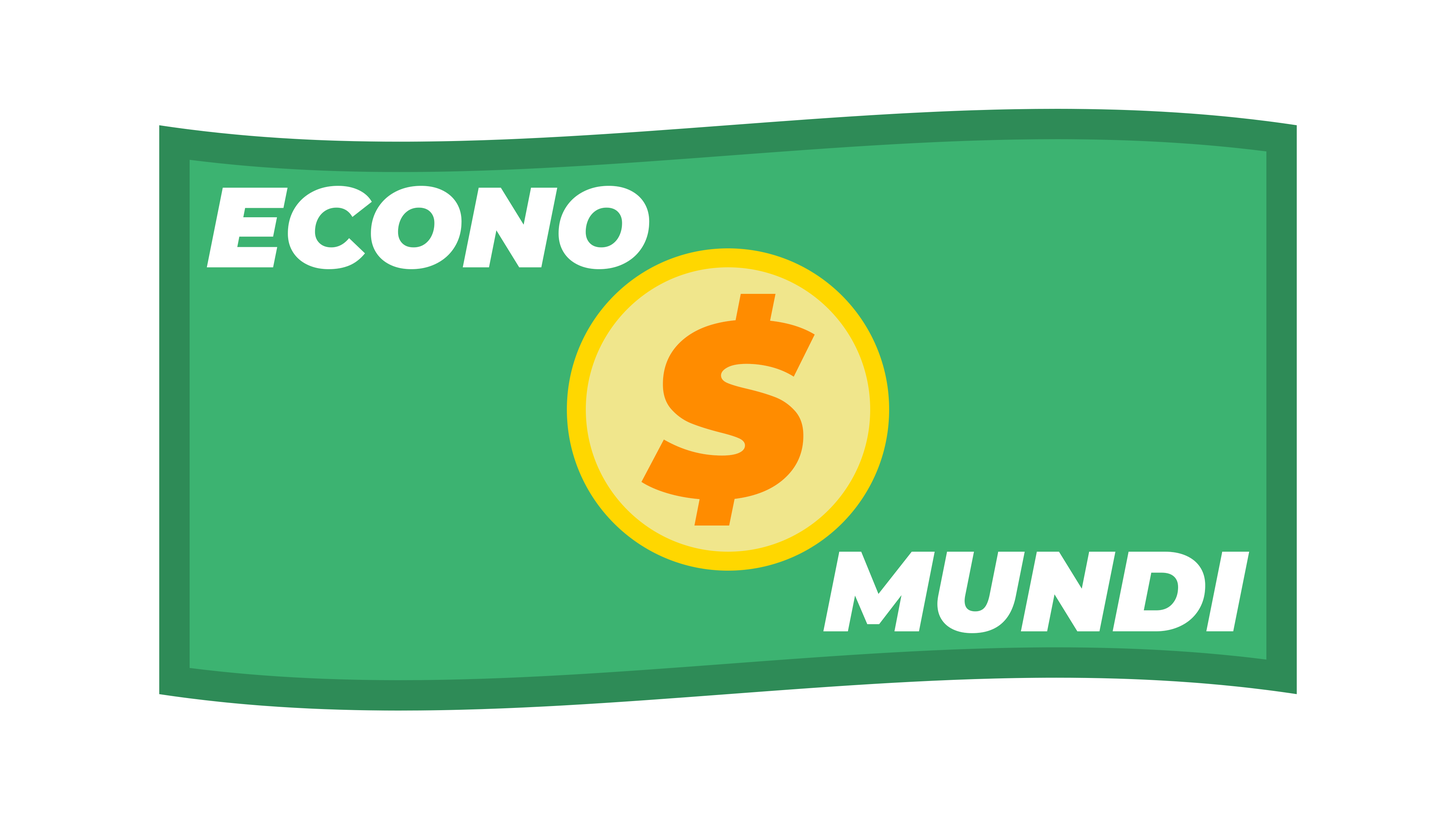
<style>
.page{position:relative;width:1456px;height:819px;background:#ffffff}
.page>*{position:absolute;margin:0}
.t1{font:113.7px "Montserrat-BlackItalic";color:#ffffff}
.t2{font:246.5px "Montserrat-BlackItalic";color:#ff8c00}
</style>
<div class="page">
<p class="t1" style="left:207px;top:186px;width:443px;height:83px">ECONO</p>
<p class="t2" style="left:641px;top:294px;width:174px;height:232px">$</p>
<p class="t1" style="left:823px;top:552px;width:426px;height:81px">MUNDI</p>
</div>
